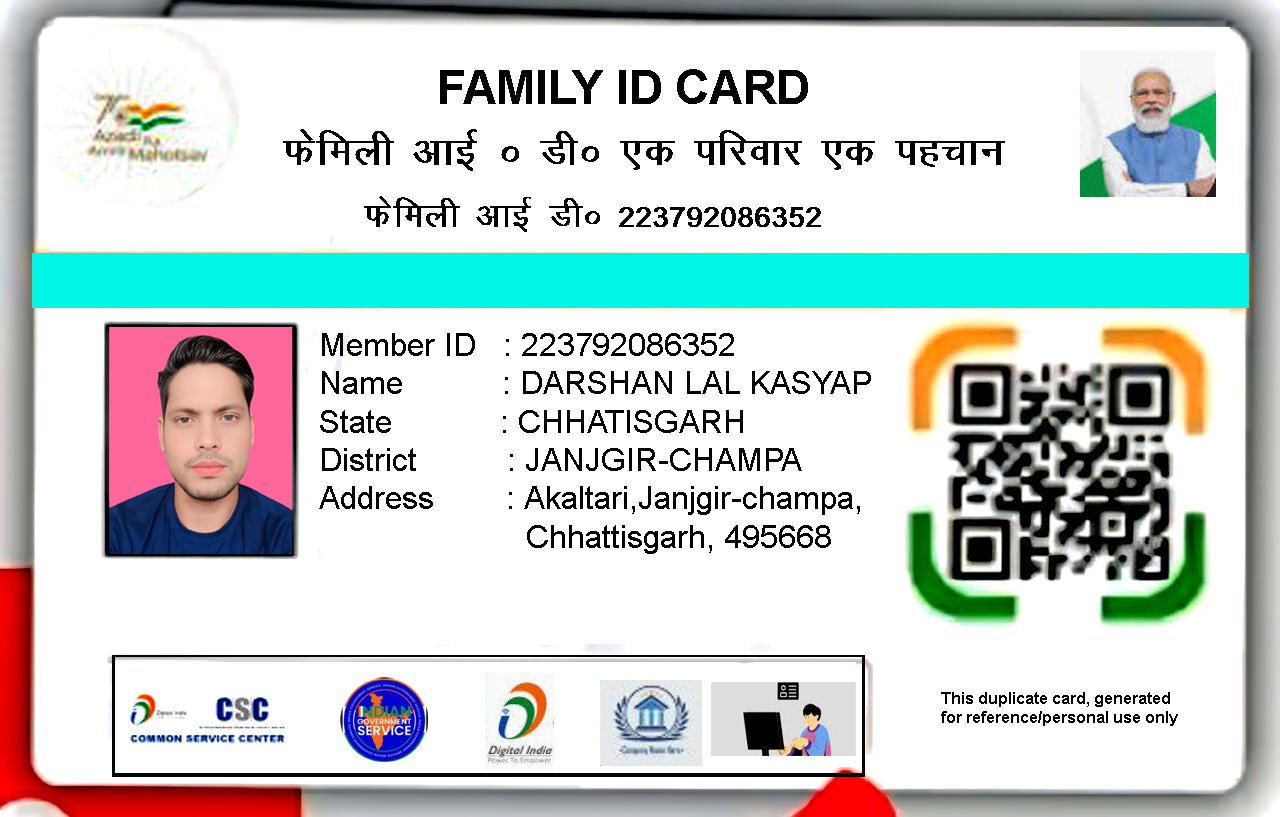
<style>
.page{position:relative;width:1280px;height:817px;background:#ffffff}
.page>*{position:absolute;margin:0}
.t1{font:46.7px "Arial-BoldMT";color:#040404}
.t2{font:46.7px "KrutiDev011";color:#040404}
.t3{font:40px "KrutiDev011";color:#040404}
.t4{font:32px "ArialMT";color:#040404}
.t5{font:32px "ArialMT";color:#030303}
.t6{font:16px "Arial-BoldMT";color:#040404}
</style>
<div class="page">
<p class="t1" style="left:440px;top:69px;width:368px;height:35px">FAMILY ID CARD</p>
<p class="t2" style="left:283px;top:129px;width:722px;height:42px">Qsfeyh vkbZ å Mhå ,d ifjokj ,d igpku</p>
<p class="t3" style="left:364px;top:196px;width:457px;height:36px">Qsfeyh vkbZ Mhå 223792086352</p>
<p class="t4" style="left:319px;top:333px;width:552px;height:221px">Member ID   : 223792086352<br>Name           : DARSHAN LAL KASYAP<br>State            : CHHATISGARH<br>District          : JANJGIR-CHAMPA<br>Address        : <span class="t5">Akaltari,Janjgir-champa,<br>                       Chhattisgarh, 495668</span></p>
<p class="t6" style="left:941px;top:692px;width:237px;height:34px">This duplicate card, generated <br>for reference/personal use only</p>
</div>
